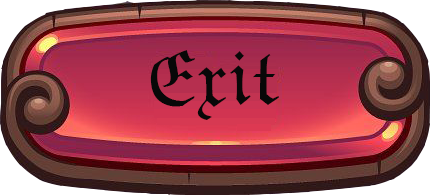
<style>
.page{position:relative;width:430px;height:195px}
.page>*{position:absolute;margin:0}
.t1{font:80px "EuclidFraktur";color:#080808}
</style>
<div class="page">
<p class="t1" style="left:150px;top:50px;width:129px;height:70px">Exit</p>
</div>
